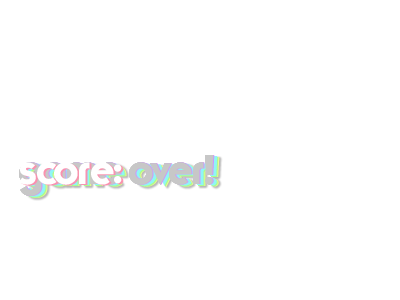
<style>
.page{position:relative;width:400px;height:300px;background:#ffffff}
.page>*{position:absolute;margin:0}
.t1{font:41.7px "TypoGraphica";color:#c7c7c7}
</style>
<div class="page">
<p class="t1" style="left:19px;top:155px;width:195px;height:41px">game over!</p>
<p class="t1" style="left:19px;top:155px;width:195px;height:41px">game over!</p>
<p class="t1" style="left:19px;top:155px;width:195px;height:41px">game over!</p>
<p class="t1" style="left:19px;top:155px;width:195px;height:41px">game over!</p>
<p class="t1" style="left:19px;top:155px;width:195px;height:41px">game over!</p>
<p class="t1" style="left:19px;top:162px;width:103px;height:23px">score:</p>
</div>
